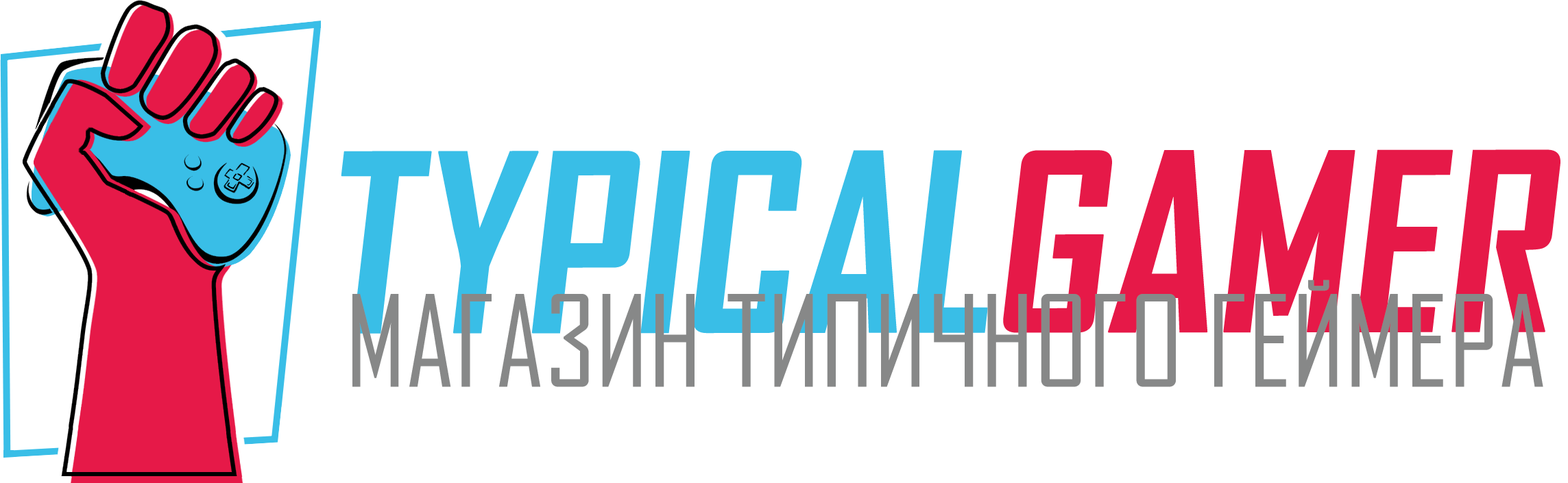
<style>
.page{position:relative;width:1568px;height:483px;background:#ffffff}
.page>*{position:absolute;margin:0}
.t1{font:238.9px "AgencyFB-Bold";letter-spacing:-0.02em;color:#39bee7;text-transform:uppercase;font-weight:bold}
.t2{font:238.9px "AgencyFB-Bold";letter-spacing:-0.02em;color:#e61948;text-transform:uppercase;font-weight:bold}
.t3{font:121.3px "AgencyFBCyrillic";color:#878888;text-transform:uppercase}
</style>
<div class="page">
<p class="t1" style="left:341px;top:149px;width:1219px;height:185px">Typical<span class="t2">Gamer</span></p>
<p class="t3" style="left:352px;top:280px;width:1191px;height:107px">Магазин типичного геймера</p>
</div>
